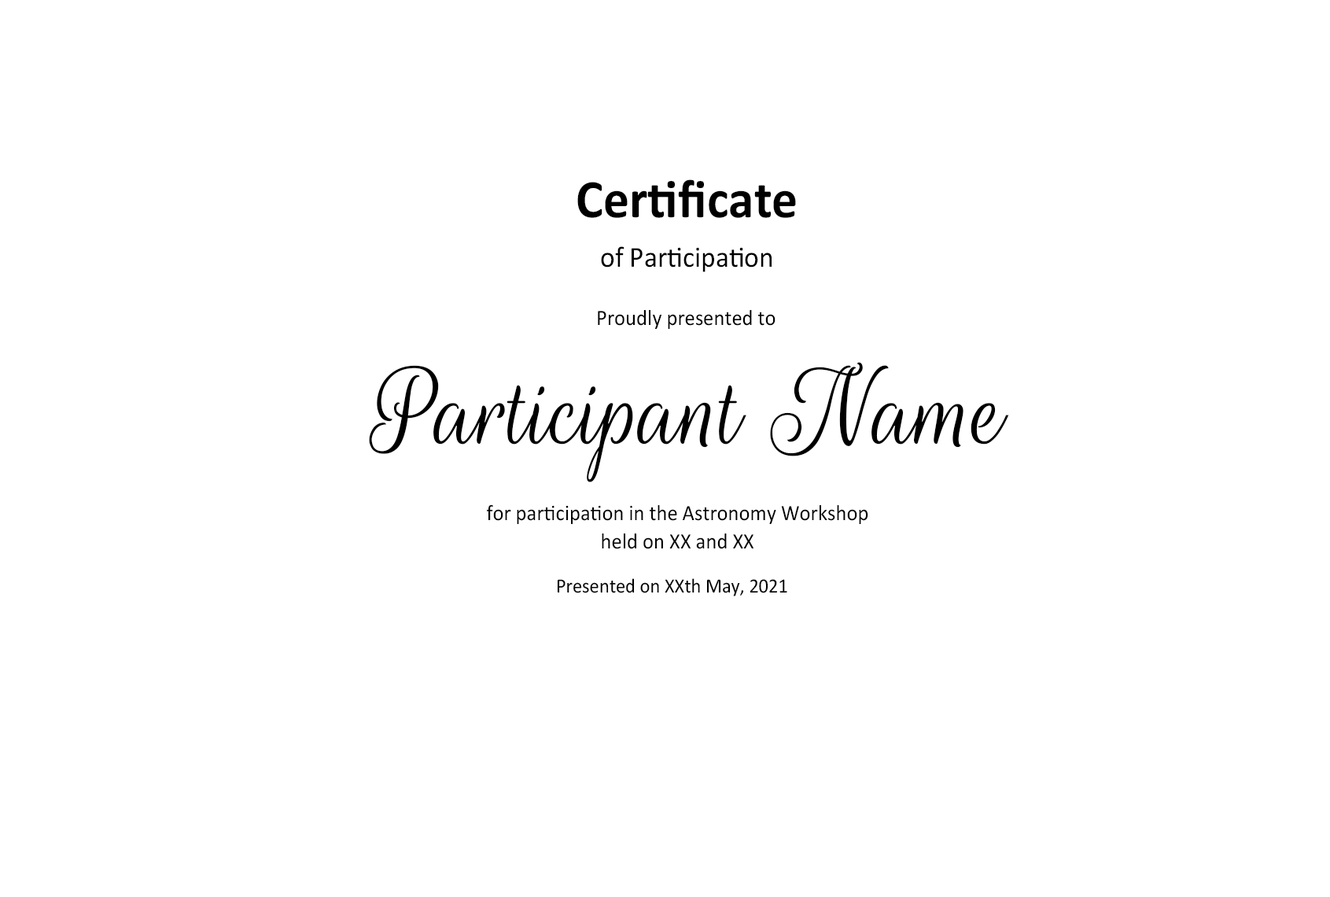
<style>
.page{position:relative;width:1330px;height:897px;background:#ffffff}
.page>*{position:absolute;margin:0}
.t1{font:29.4px/49px "Calibri";color:#000000;scale:0.95 1}
.t2{font:54.5px/49px "Calibri-Bold";color:#000000;scale:0.95 1}
.t3{font:22px "Calibri";color:#000000;scale:0.95 1}
.t4{font:119.9px "RougeScript-Regular";color:#000000;scale:0.95 1}
.t5{font:22px/28.1px "Calibri";color:#000000;scale:0.95 1}
.t6{font:20.3px "Calibri";color:#000000;scale:0.95 1}
</style>
<div class="page">
<p class="t1" style="left:577px;top:179px;width:219px;height:93px;text-align:center"><span class="t2">Certificate<br></span>of Participation</p>
<p class="t3" style="left:598px;top:310px;width:177px;height:19px">Proudly presented to</p>
<p class="t4" style="left:369px;top:362px;width:640px;height:120px">Participant Name</p>
<p class="t5" style="left:487px;top:504px;width:381px;height:45px;text-align:center">for participation in the Astronomy Workshop<br>held on XX and XX</p>
<p class="t6" style="left:557px;top:578px;width:230px;height:18px">Presented on XXth May, 2021</p>
</div>
